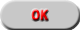
<style>
.page{position:relative;width:80px;height:30px;background:#c8c8c8}
.page>*{position:absolute;margin:0}
.t1{font:14px "GothicXB-HM"}
</style>
<div class="page">
<p class="t1" style="left:31px;top:9px;width:17px;height:12px">OK</p>
</div>
